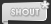
<style>
.page{position:relative;width:51px;height:24px}
.page>*{position:absolute;margin:0}
.t1{font:19px "Advantage-Demi";color:#e0e0e0}
.t2{font:9px "Advantage-Demi";letter-spacing:0.06em;color:#e0e0e0}
</style>
<div class="page">
<p class="t1" style="left:41px;top:1px;width:8px;height:8px">*</p>
<p class="t2" style="left:11px;top:8px;width:28px;height:8px">SHOUT</p>
</div>
